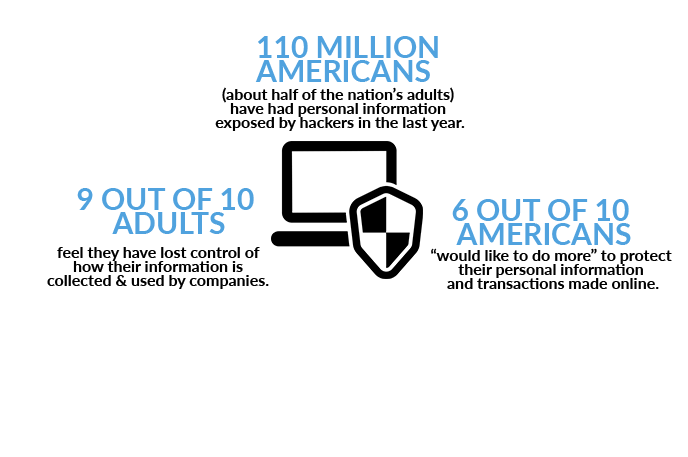
<style>
.page{position:relative;width:688px;height:457px;background:#ffffff}
.page>*{position:absolute;margin:0}
.t1{font:30px/24px "Lato-Bold";color:#50a2de}
.t2{font:16px/14px "Lato-Bold";color:#000000}
</style>
<div class="page">
<p class="t1" style="left:255px;top:36px;width:183px;height:46px">110 MILLION<br>AMERICANS</p>
<p class="t2" style="left:215px;top:87px;width:250px;height:44px;text-align:center">(about half of the nation’s adults) <br>have had personal information <br>exposed by hackers in the last year.</p>
<p class="t1" style="left:77px;top:188px;width:177px;height:46px;text-align:center">9 OUT OF 10 <br>ADULTS</p>
<p class="t1" style="left:452px;top:199px;width:179px;height:46px;text-align:center">6 OUT OF 10 <br>AMERICANS</p>
<p class="t2" style="left:47px;top:247px;width:222px;height:42px;text-align:center">feel they have lost control of <br>how their information is <br>collected &amp; used by companies.</p>
<p class="t2" style="left:431px;top:248px;width:241px;height:41px;text-align:center">“would like to do more” to protect <br>their personal information <br>and transactions made online.</p>
</div>
